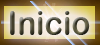
<style>
.page{position:relative;width:100px;height:45px}
.page>*{position:absolute;margin:0}
.t1{font:34px "ArialRoundedMTBold";scale:0.92 1}
</style>
<div class="page">
<p class="t1" style="left:10px;top:11px;width:80px;height:24px">Inicio</p>
</div>
